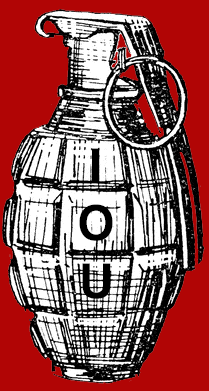
<style>
.page{position:relative;width:209px;height:391px;background:#b10505}
.page>*{position:absolute;margin:0}
.t1{font:48px "Helvetica-Bold";color:#000000}
</style>
<div class="page">
<p class="t1" style="left:79px;top:148px;width:34px;height:151px;text-align:center">I<br>O<br>U</p>
</div>
